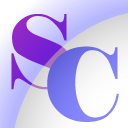
<style>
.page{position:relative;width:128px;height:128px}
.page>*{position:absolute;margin:0}
.t1{font:100px "Elephant-Regular"}
.t2{font:100px "Elephant-Regular";color:#7676ee}
</style>
<div class="page">
<p class="t1" style="left:11px;top:14px;width:62px;height:76px">S</p>
<p class="t2" style="left:47px;top:46px;width:72px;height:76px">C</p>
</div>
